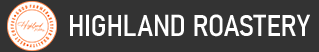
<style>
.page{position:relative;width:319px;height:52px;background:#333333}
.page>*{position:absolute;margin:0}
.t1{font:30px "Bahnschrift-SemiCondensed";letter-spacing:-0.01em;color:#ffffff}
</style>
<div class="page">
<p class="t1" style="left:70px;top:14px;width:240px;height:23px">HIGHLAND ROASTERY</p>
</div>
